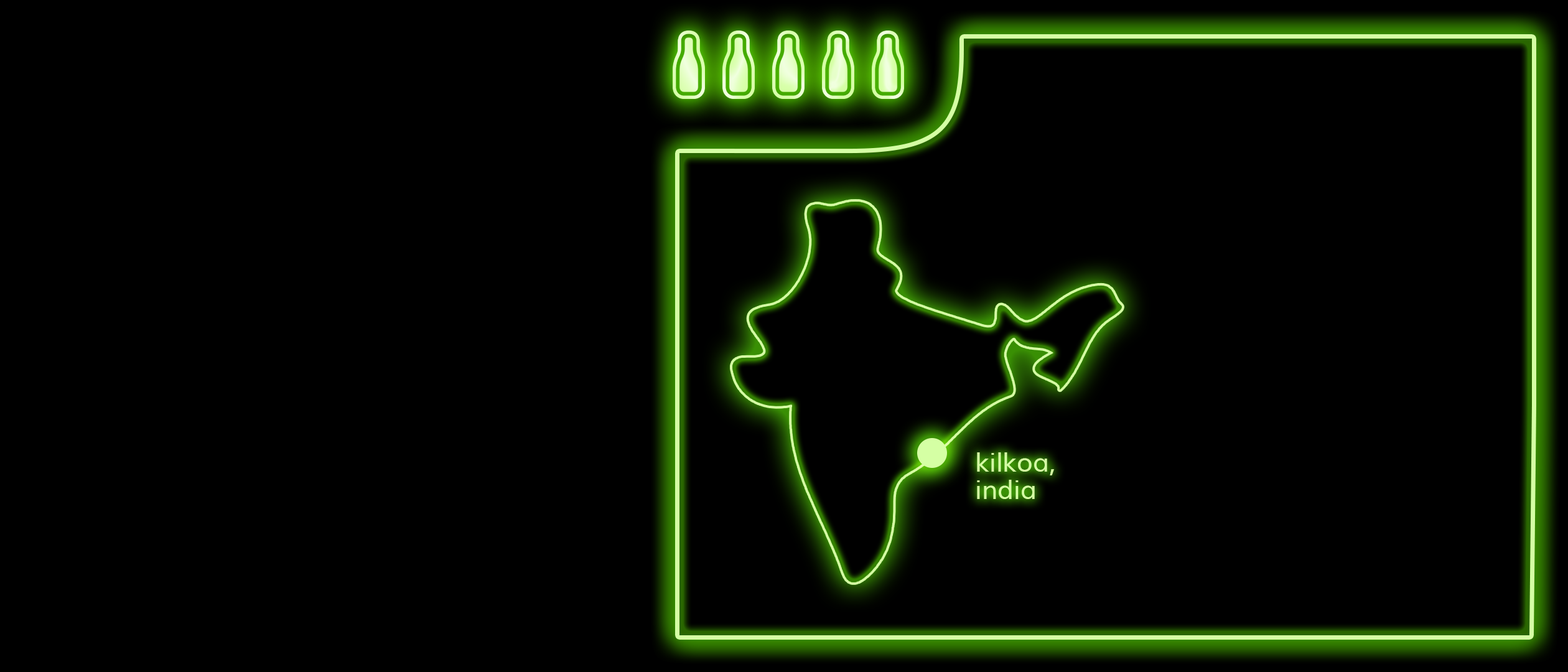
<style>
.page{position:relative;width:1568px;height:672px;background:#000000}
.page>*{position:absolute;margin:0}
.t1{font:26.1px/27.4px "Muli";color:#d5ffa4}
</style>
<div class="page">
<p class="t1" style="left:977px;top:452px;width:77px;height:47px">kilkoa, <br>india</p>
</div>
